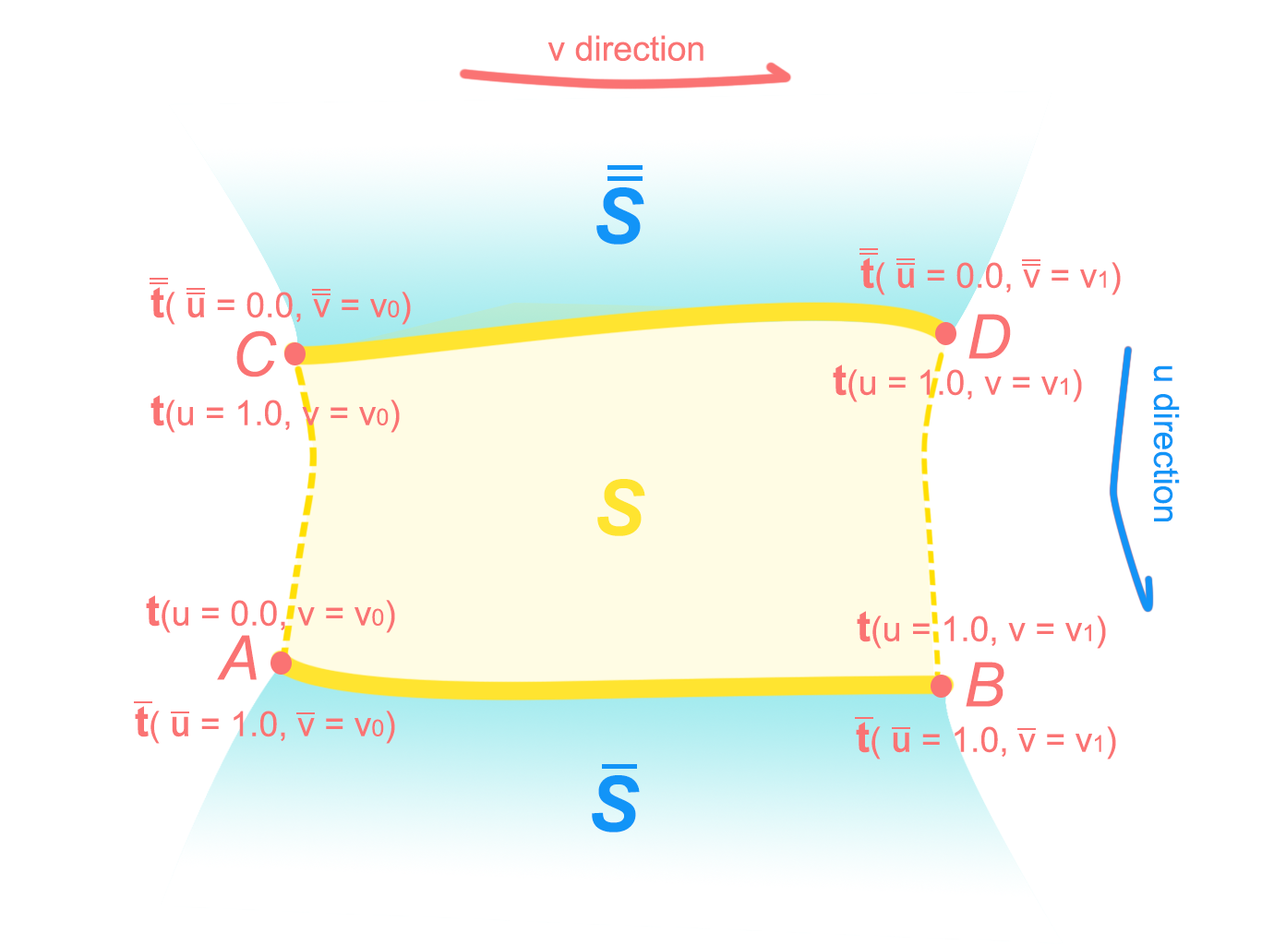
<style>
.page{position:relative;width:1262px;height:945px;background:#ffffff}
.page>*{position:absolute;margin:0}
.t1{font:34.6px "ArialMT";color:#fa7373}
.t2{font:76.9px "Arial-BoldItalicMT";color:#1294f7}
.t3{font:42.3px "Arial-BoldMT";color:#fa7373}
.t4{font:34.6px "AdobeHeitiStd-Regular";color:#fa7373}
.t5{font:23.1px "ArialMT";color:#fa7373}
.t6{font:61.5px "Arial-ItalicMT";color:#fa7373}
.t7{font:34.6px "ArialMT";color:#1294f7}
.t8{font:76.9px "Arial-BoldItalicMT";color:#ffe430}
</style>
<div class="page">
<p class="t1" style="left:547px;top:35px;width:156px;height:26px">v direction</p>
<p class="t2" style="left:596px;top:187px;width:48px;height:58px">S</p>
<p class="t1" style="left:860px;top:258px;width:260px;height:37px"><span class="t3">t</span>( <span class="t4">u</span> = 0.0, v = v<span class="t5">1</span>)</p>
<p class="t1" style="left:150px;top:287px;width:261px;height:38px"><span class="t3">t</span>( <span class="t4">u</span> = 0.0, v = v<span class="t5">0</span>)</p>
<p class="t6" style="left:968px;top:314px;width:43px;height:45px">D</p>
<p class="t6" style="left:236px;top:330px;width:41px;height:47px">C</p>
<p class="t1" style="left:833px;top:365px;width:249px;height:37px"><span class="t3">t</span>(u = 1.0, v = v<span class="t5">1</span>)</p>
<p class="t7" style="left:1153px;top:365px;width:27px;height:156px;rotate:90deg">u direction</p>
<p class="t1" style="left:150px;top:395px;width:250px;height:38px"><span class="t3">t</span>(u = 1.0, v = v<span class="t5">0</span>)</p>
<p class="t8" style="left:597px;top:479px;width:48px;height:57px">S</p>
<p class="t1" style="left:146px;top:595px;width:249px;height:38px"><span class="t3">t</span>(u = 0.0, v = v<span class="t5">0</span>)</p>
<p class="t1" style="left:857px;top:611px;width:249px;height:38px"><span class="t3">t</span>(u = 1.0, v = v<span class="t5">1</span>)</p>
<p class="t6" style="left:217px;top:635px;width:40px;height:45px">A</p>
<p class="t6" style="left:965px;top:662px;width:39px;height:45px">B</p>
<p class="t1" style="left:135px;top:706px;width:260px;height:38px"><span class="t3">t</span>( <span class="t4">u</span> = 1.0, v = v<span class="t5">0</span>)</p>
<p class="t1" style="left:856px;top:722px;width:260px;height:38px"><span class="t3">t</span>( <span class="t4">u</span> = 1.0, v = v<span class="t5">1</span>)</p>
<p class="t2" style="left:592px;top:775px;width:48px;height:58px">S</p>
</div>
